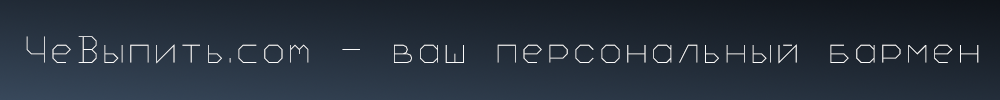
<style>
.page{position:relative;width:1000px;height:100px}
.page>*{position:absolute;margin:0}
.t1{font:36px "Txt";color:#fbfbfb}
</style>
<div class="page">
<p class="t1" style="left:26px;top:36px;width:953px;height:28px">ЧеВыпить.com - ваш персональный бармен</p>
</div>
